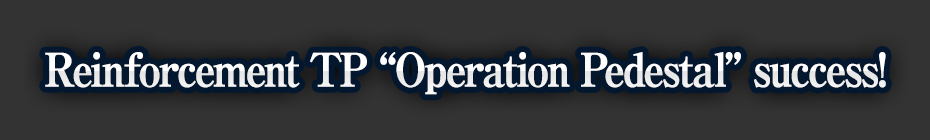
<style>
.page{position:relative;width:930px;height:140px;background:#333333}
.page>*{position:absolute;margin:0}
.t1{font:46px "RyuminPro-ExBold";letter-spacing:-0.08em;color:#ffffff;font-weight:bold;scale:0.9 1}
</style>
<div class="page">
<p class="t1" style="left:45px;top:52px;width:841px;height:43px">Reinforcement TP “Operation Pedestal” success!</p>
</div>
